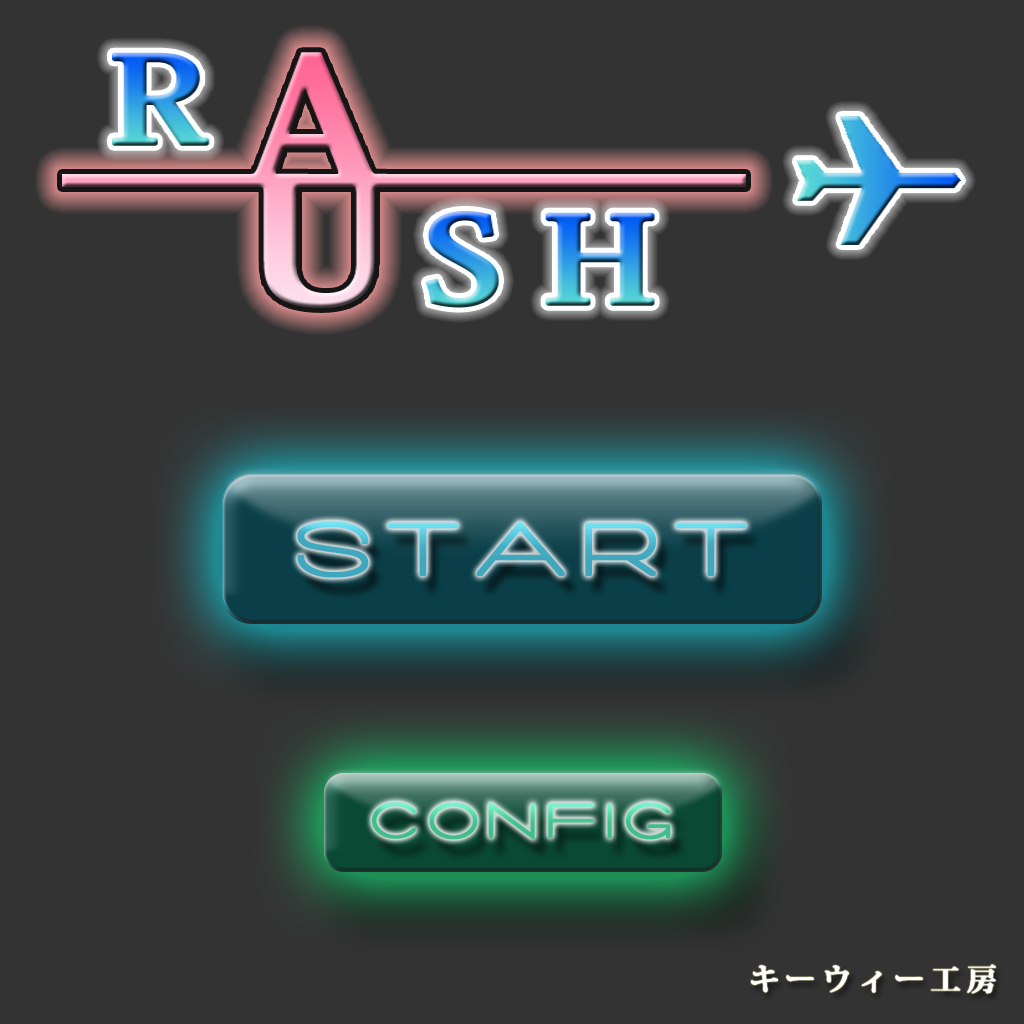
<style>
.page{position:relative;width:1024px;height:1024px;background:#333333}
.page>*{position:absolute;margin:0}
.t1{font:80px "Salaryman";letter-spacing:0.18em;font-weight:bold}
.t2{font:52px "Salaryman";letter-spacing:0.18em;font-weight:bold}
.t3{font:30px "KozMinPro-Bold";letter-spacing:0.18em;color:#ffffff;font-weight:bold}
</style>
<div class="page">
<p class="t1" style="left:297px;top:521px;width:450px;height:57px">START</p>
<p class="t2" style="left:372px;top:802px;width:299px;height:38px">CONFIG</p>
<p class="t3" style="left:751px;top:964px;width:245px;height:30px">キーウィー工房</p>
</div>
